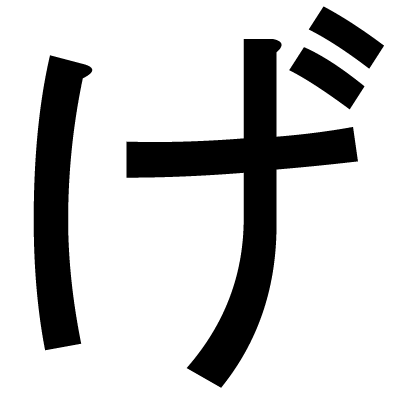
<style>
.page{position:relative;width:400px;height:400px;background:#ffffff}
.page>*{position:absolute;margin:0}
.t1{font:416.7px "MS-PGothic";color:#000000}
</style>
<div class="page">
<p class="t1" style="left:33px;top:6px;width:351px;height:382px">げ</p>
</div>
